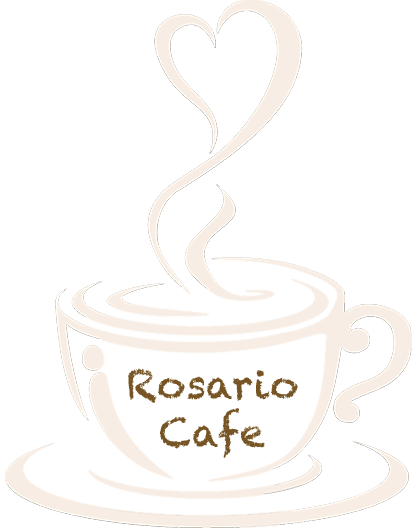
<style>
.page{position:relative;width:417px;height:528px;background:#ffffff}
.page>*{position:absolute;margin:0}
.t1{font:40px "Chalkduster";color:#775423}
</style>
<div class="page">
<p class="t1" style="left:128px;top:368px;width:170px;height:90px;text-align:center">Rosario <br>Cafe</p>
</div>
